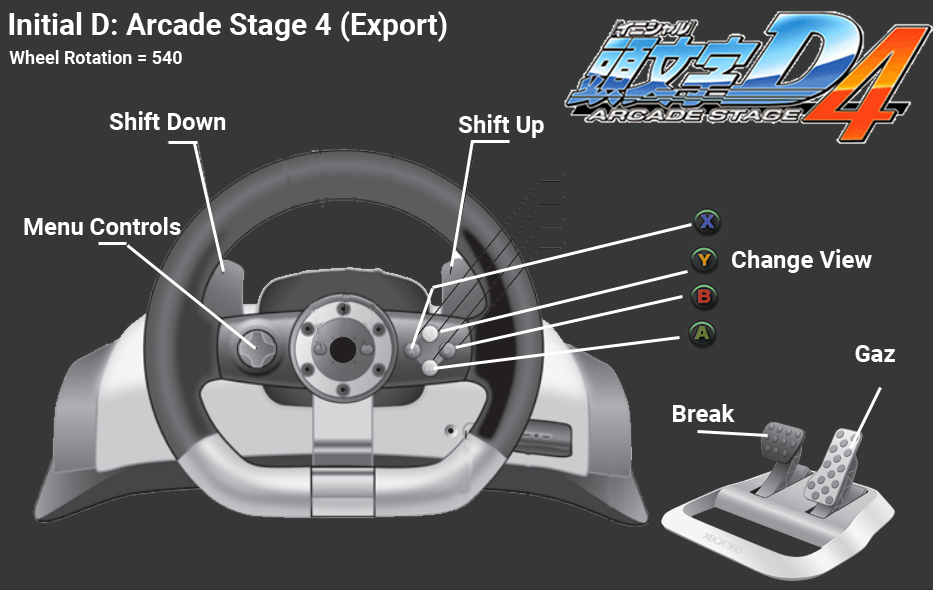
<style>
.page{position:relative;width:933px;height:590px;background:#363838}
.page>*{position:absolute;margin:0}
.t1{font:30px "Roboto-Bold";color:#ffffff}
.t2{font:18px "Roboto-Bold";color:#ffffff}
.t3{font:24px "Roboto-Bold";color:#ffffff}
</style>
<div class="page">
<p class="t1" style="left:9px;top:11px;width:438px;height:31px">Initial D: Arcade Stage 4 (Export)</p>
<p class="t2" style="left:9px;top:50px;width:173px;height:14px">Wheel Rotation = 540</p>
<p class="t3" style="left:109px;top:111px;width:117px;height:19px">Shift Down</p>
<p class="t3" style="left:458px;top:114px;width:86px;height:24px">Shift Up</p>
<p class="t3" style="left:24px;top:217px;width:157px;height:18px">Menu Controls</p>
<p class="t3" style="left:732px;top:249px;width:140px;height:24px">Change View</p>
<p class="t3" style="left:855px;top:345px;width:40px;height:17px">Gaz</p>
<p class="t3" style="left:673px;top:404px;width:62px;height:18px">Break</p>
</div>
